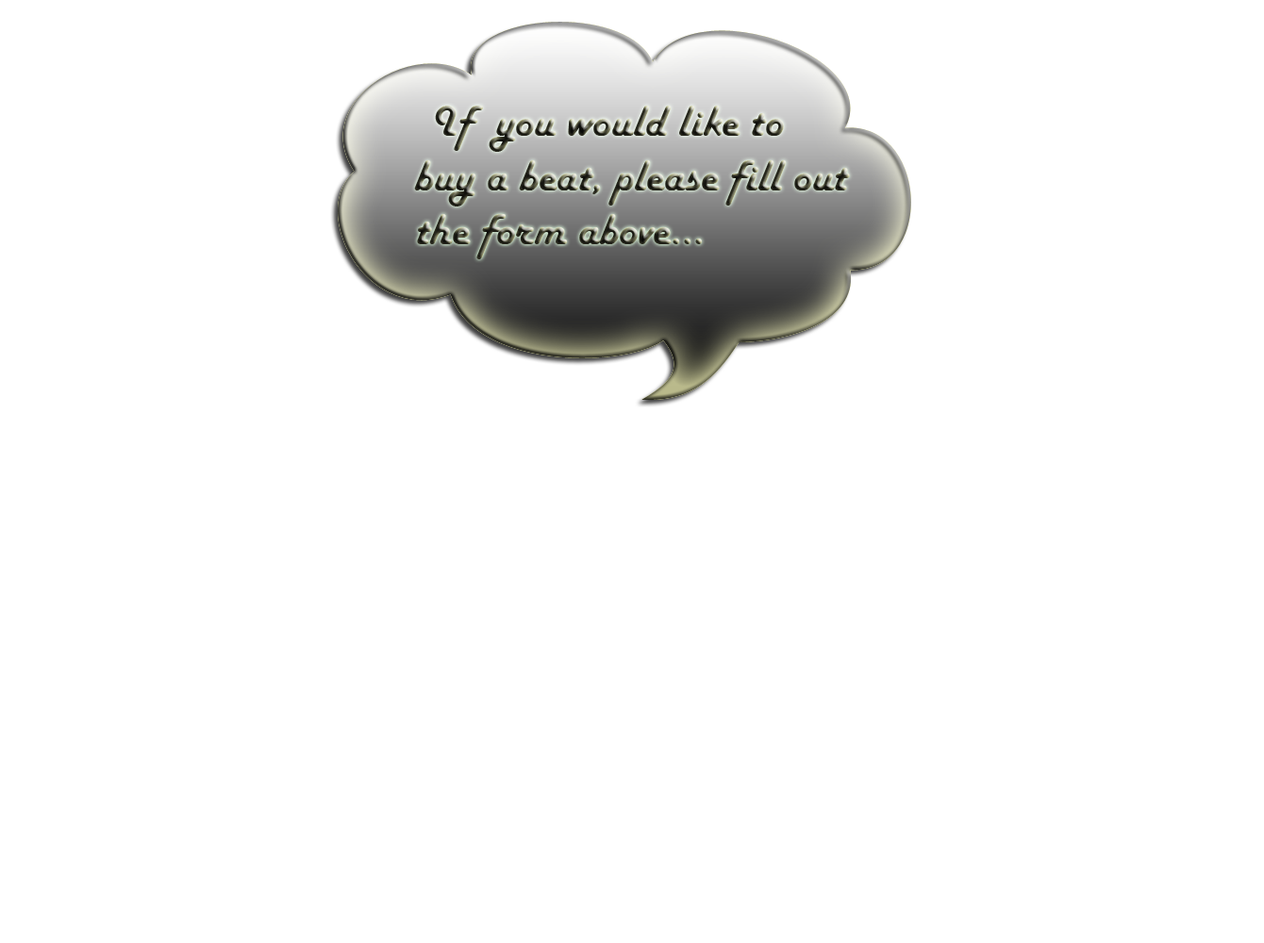
<style>
.page{position:relative;width:1264px;height:943px;background:#ffffff}
.page>*{position:absolute;margin:0}
.t1{font:45.3px "HarlowSolid"}
</style>
<div class="page">
<p class="t1" style="left:414px;top:106px;width:436px;height:153px">If  you would like to buy a beat, please fill out     the form above...</p>
</div>
